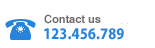
<style>
.page{position:relative;width:155px;height:48px;background:#ffffff}
.page>*{position:absolute;margin:0}
.t1{font:14px "KozGoPr6N-Heavy";color:#2784db}
</style>
<div class="page">
<p class="t1" style="left:44px;top:28px;width:80px;height:12px">123.456.789</p>
</div>
